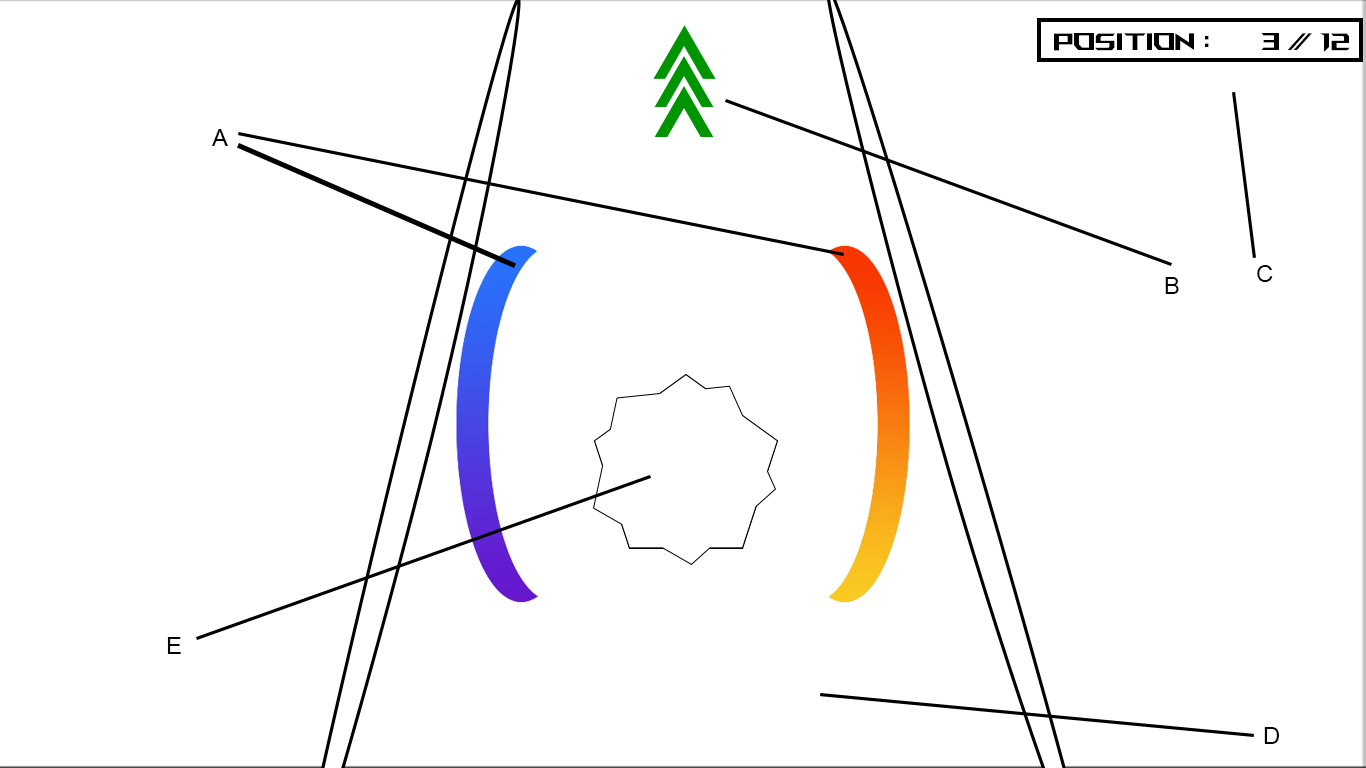
<style>
.page{position:relative;width:1366px;height:768px;background:#ffffff}
.page>*{position:absolute;margin:0}
.t1{font:24px "ROGFonts-Regular";color:#000000}
.t2{font:24px "ArialMT";color:#000000}
</style>
<div class="page">
<p class="t1" style="left:1054px;top:33px;width:296px;height:19px">pOSITION :       3 / 12</p>
<p class="t2" style="left:212px;top:129px;width:16px;height:17px">A</p>
<p class="t2" style="left:1257px;top:265px;width:16px;height:17px">C</p>
<p class="t2" style="left:1165px;top:277px;width:14px;height:17px">B</p>
<p class="t2" style="left:167px;top:637px;width:14px;height:17px">E</p>
<p class="t2" style="left:1264px;top:727px;width:16px;height:17px">D</p>
</div>
